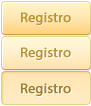
<style>
.page{position:relative;width:91px;height:106px}
.page>*{position:absolute;margin:0}
.t1{font:14px "MyriadPro-Regular";color:#b99431;font-weight:bold}
.t2{font:14px "MyriadPro-Regular";color:#a08029;font-weight:bold}
</style>
<div class="page">
<p class="t1" style="left:21px;top:12px;width:50px;height:13px">Registro</p>
<p class="t1" style="left:21px;top:47px;width:50px;height:13px">Registro</p>
<p class="t2" style="left:21px;top:83px;width:50px;height:13px">Registro</p>
</div>
